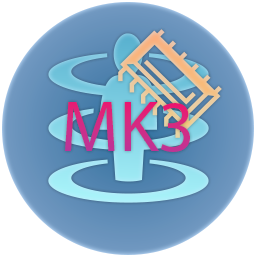
<style>
.page{position:relative;width:256px;height:256px;background:#ffffff}
.page>*{position:absolute;margin:0}
.t1{font:72px "MyriadPro-Regular";color:#d32c84}
</style>
<div class="page">
<p class="t1" style="left:65px;top:102px;width:125px;height:50px">MK3</p>
</div>
